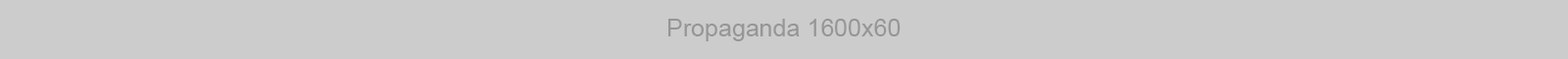
<style>
.page{position:relative;width:1568px;height:59px;background:#cccccc}
.page>*{position:absolute;margin:0}
.t1{font:24.5px "ArialMT";color:#969696}
</style>
<div class="page">
<p class="t1" style="left:668px;top:19px;width:233px;height:22px">Propaganda 1600x60</p>
</div>
